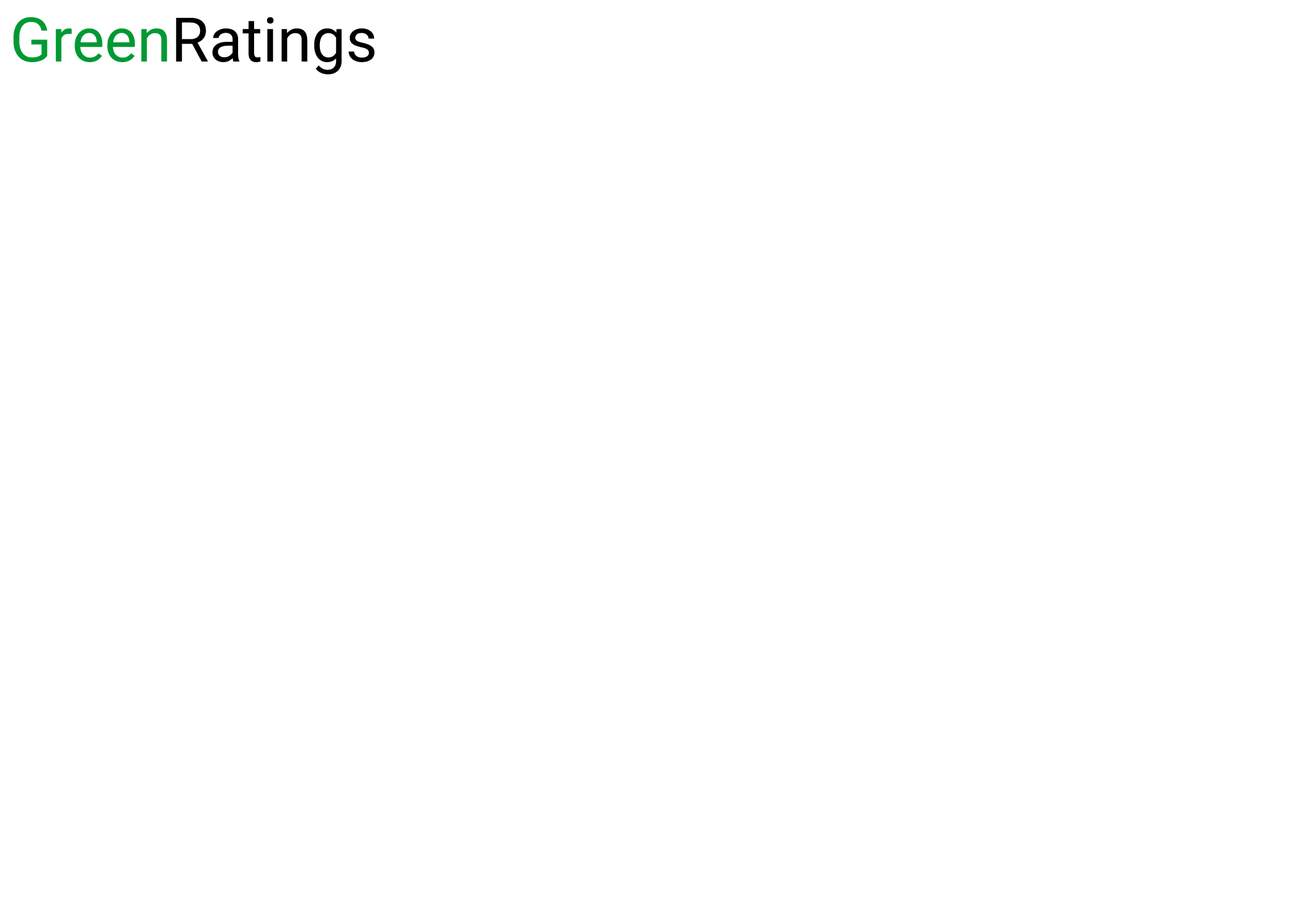
<style>
.page{position:relative;width:1292px;height:923px;background:#ffffff}
.page>*{position:absolute;margin:0}
.t1{font:61.5px "Roboto-Regular";color:#000000}
.t2{font:61.5px "Roboto-Regular";color:#009933}
</style>
<div class="page">
<p class="t1" style="left:14px;top:17px;width:361px;height:57px"><span class="t2">Green</span>Ratings</p>
</div>
